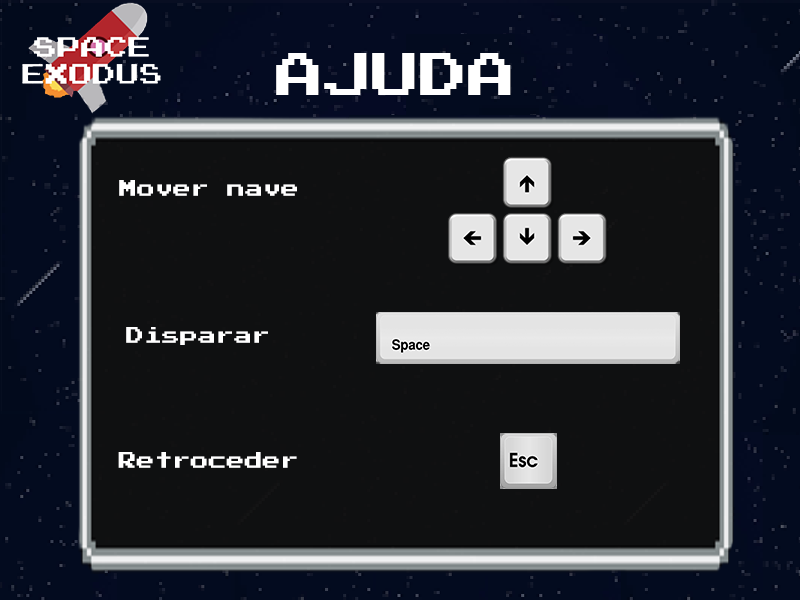
<style>
.page{position:relative;width:800px;height:600px;background:#0f1011}
.page>*{position:absolute;margin:0}
.t1{font:48px "PressStart2P";color:#ffffff}
.t2{font:18px "PressStart2P";color:#ffffff}
</style>
<div class="page">
<p class="t1" style="left:276px;top:53px;width:235px;height:42px">AJUDA</p>
<p class="t2" style="left:119px;top:180px;width:178px;height:16px">Mover nave</p>
<p class="t2" style="left:126px;top:327px;width:142px;height:18px">Disparar</p>
<p class="t2" style="left:118px;top:452px;width:179px;height:16px">Retroceder</p>
</div>
